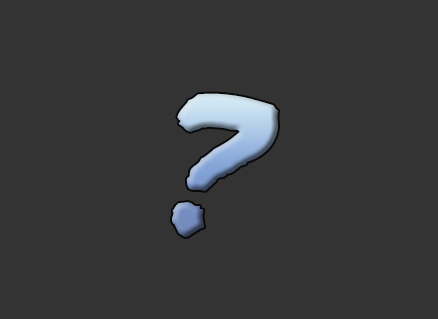
<style>
.page{position:relative;width:438px;height:319px;background:#333333}
.page>*{position:absolute;margin:0}
.t1{font:186.3px "PermanentMarker-Regular";letter-spacing:0.1em;text-transform:uppercase;font-weight:bold}
</style>
<div class="page">
<p class="t1" style="left:171px;top:93px;width:108px;height:144px">?</p>
</div>
